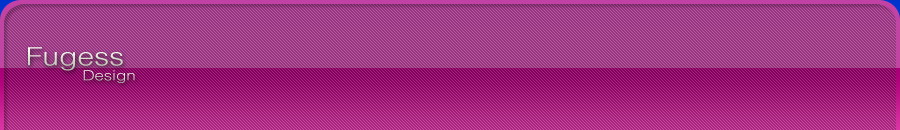
<style>
.page{position:relative;width:900px;height:130px}
.page>*{position:absolute;margin:0}
.t1{font:25px "HelvLight-Normal";color:#d9e0d2;scale:1.2 1}
.t2{font:14px "HelvLight-Normal";color:#dbe2d4;scale:1.2 1}
</style>
<div class="page">
<p class="t1" style="left:28px;top:47px;width:95px;height:24px">Fugess</p>
<p class="t2" style="left:83px;top:70px;width:52px;height:13px">Design</p>
</div>
